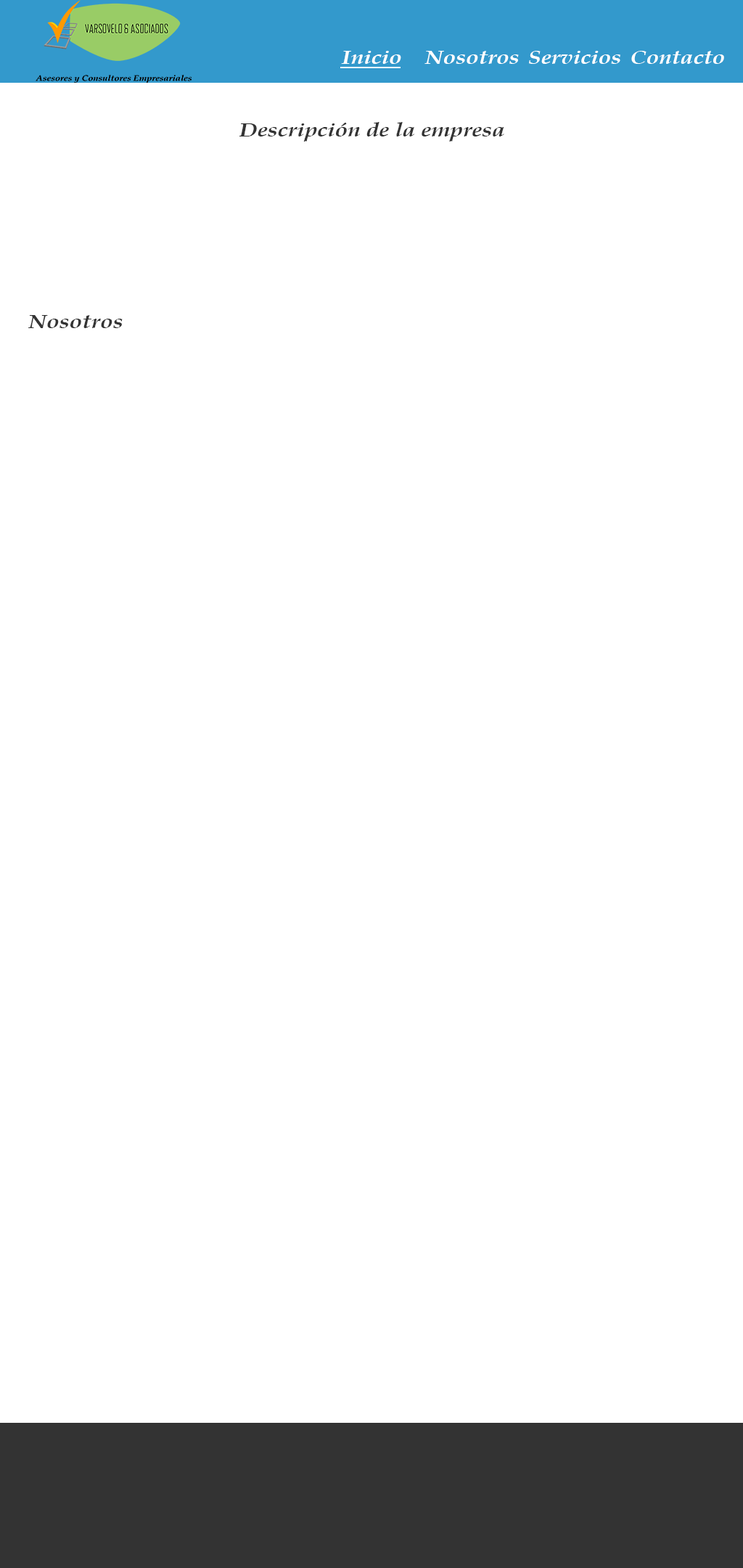
<style>
.page{position:relative;width:743px;height:1568px;background:#ffffff}
.page>*{position:absolute;margin:0}
.t1{font:19.6px "BookAntiqua-BoldItalic";color:#ffffff;scale:1.17 1}
.t2{font:19.6px "BookAntiqua-BoldItalic";color:#333333;scale:1.17 1}
</style>
<div class="page">
<p class="t1" style="left:341px;top:51px;width:60px;height:13px">Inicio</p>
<p class="t1" style="left:425px;top:51px;width:94px;height:13px">Nosotros</p>
<p class="t1" style="left:529px;top:51px;width:92px;height:13px">Servicios</p>
<p class="t1" style="left:632px;top:51px;width:92px;height:13px">Contacto</p>
<p class="t2" style="left:240px;top:122px;width:265px;height:20px">Descripción de la empresa</p>
<p class="t2" style="left:28px;top:315px;width:95px;height:13px">Nosotros</p>
</div>
